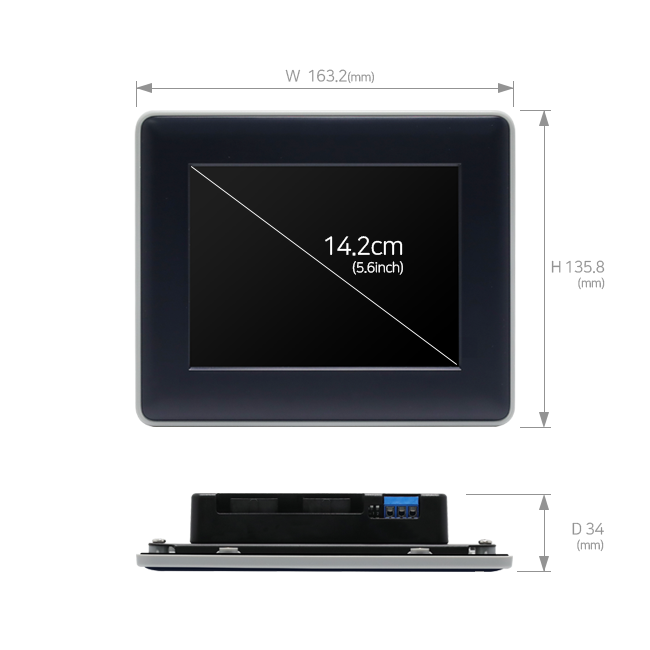
<style>
.page{position:relative;width:650px;height:650px;background:#ffffff}
.page>*{position:absolute;margin:0}
.t1{font:16px "NanumSquareR";letter-spacing:-0.03em;color:#939393}
.t2{font:12px "NanumSquareR";letter-spacing:-0.03em;color:#939393}
.t3{font:14px/18px "NanumSquareR";letter-spacing:-0.03em;color:#ffffff}
.t4{font:25px/18px "NanumSquareR";letter-spacing:-0.03em;color:#ffffff}
.t5{font:16px/15px "NanumSquareR";letter-spacing:-0.03em;color:#939393}
.t6{font:12px/15px "NanumSquareR";letter-spacing:-0.03em;color:#939393}
</style>
<div class="page">
<p class="t1" style="left:285px;top:69px;width:89px;height:15px">W  163.2<span class="t2">(mm)</span></p>
<p class="t3" style="left:325px;top:236px;width:78px;height:39px;text-align:right"><span class="t4">14.2cm<br></span>(5.6inch)</p>
<p class="t5" style="left:551px;top:260px;width:54px;height:30px;text-align:right">H 135.8<br><span class="t6">(mm)</span></p>
<p class="t5" style="left:572px;top:522px;width:32px;height:30px;text-align:right">D 34<br><span class="t6">(mm)</span></p>
</div>
